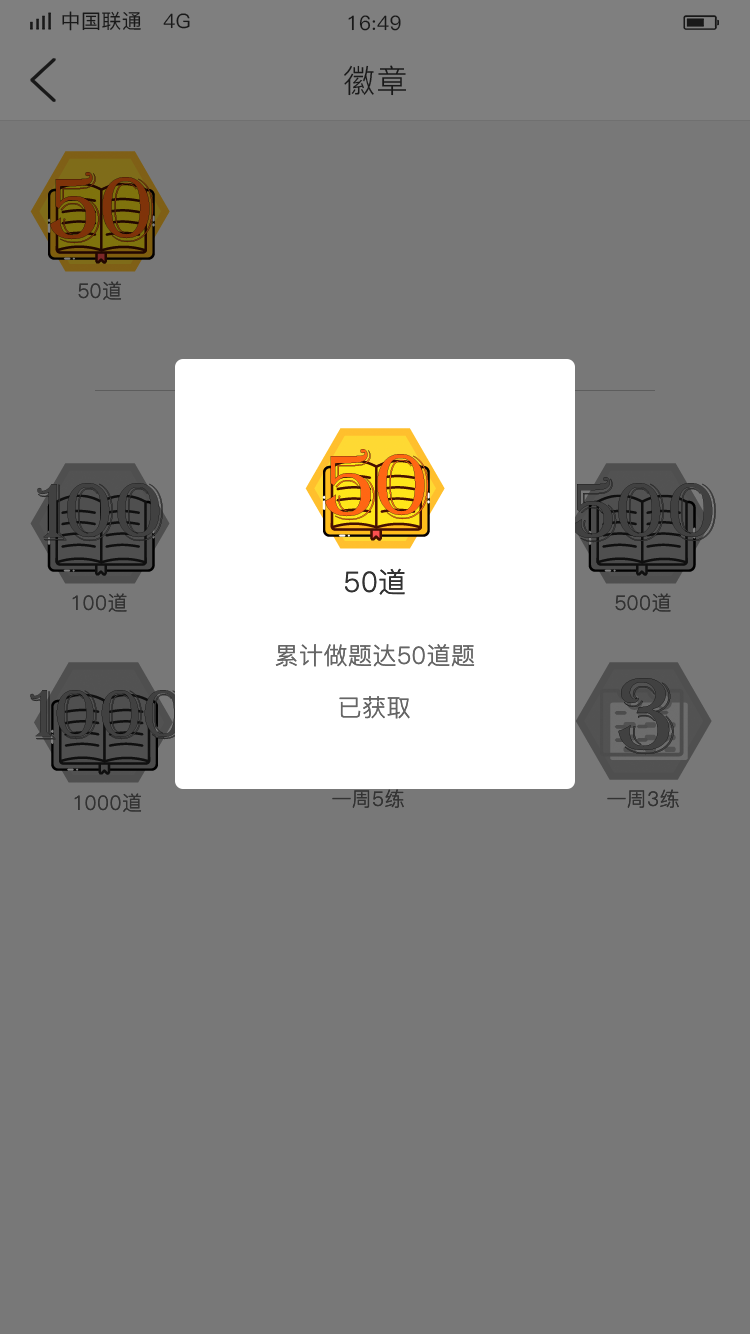
<style>
.page{position:relative;width:750px;height:1334px;background:#787878}
.page>*{position:absolute;margin:0}
.t1{font:20px "PingFang-SC-Medium";letter-spacing:0.02em;color:#191919}
.t2{font:32px "PingFang-SC-Regular";letter-spacing:0.02em;color:#191919}
.t3{font:20px "PingFang-SC-Regular";letter-spacing:0.02em;color:#333333}
.t4{font:28px "PingFang-SC-Regular";letter-spacing:0.02em;color:#333333}
.t5{font:24px "PingFang-SC-Regular";letter-spacing:0.02em;color:#666666}
</style>
<div class="page">
<p class="t1" style="left:62px;top:11px;width:128px;height:20px">中国联通   4G</p>
<p class="t1" style="left:348px;top:15px;width:53px;height:16px">16:49</p>
<p class="t2" style="left:344px;top:65px;width:62px;height:31px">徽章</p>
<p class="t3" style="left:78px;top:281px;width:44px;height:19px">50道</p>
<p class="t4" style="left:345px;top:568px;width:60px;height:27px">50道</p>
<p class="t3" style="left:72px;top:593px;width:55px;height:19px">100道</p>
<p class="t3" style="left:615px;top:593px;width:56px;height:19px">500道</p>
<p class="t5" style="left:275px;top:644px;width:200px;height:23px">累计做题达50道题</p>
<p class="t5" style="left:339px;top:696px;width:71px;height:23px">已获取</p>
<p class="t3" style="left:74px;top:793px;width:68px;height:19px">1000道</p>
<p class="t3" style="left:332px;top:789px;width:72px;height:19px">一周5练</p>
<p class="t3" style="left:607px;top:789px;width:72px;height:19px">一周3练</p>
</div>
